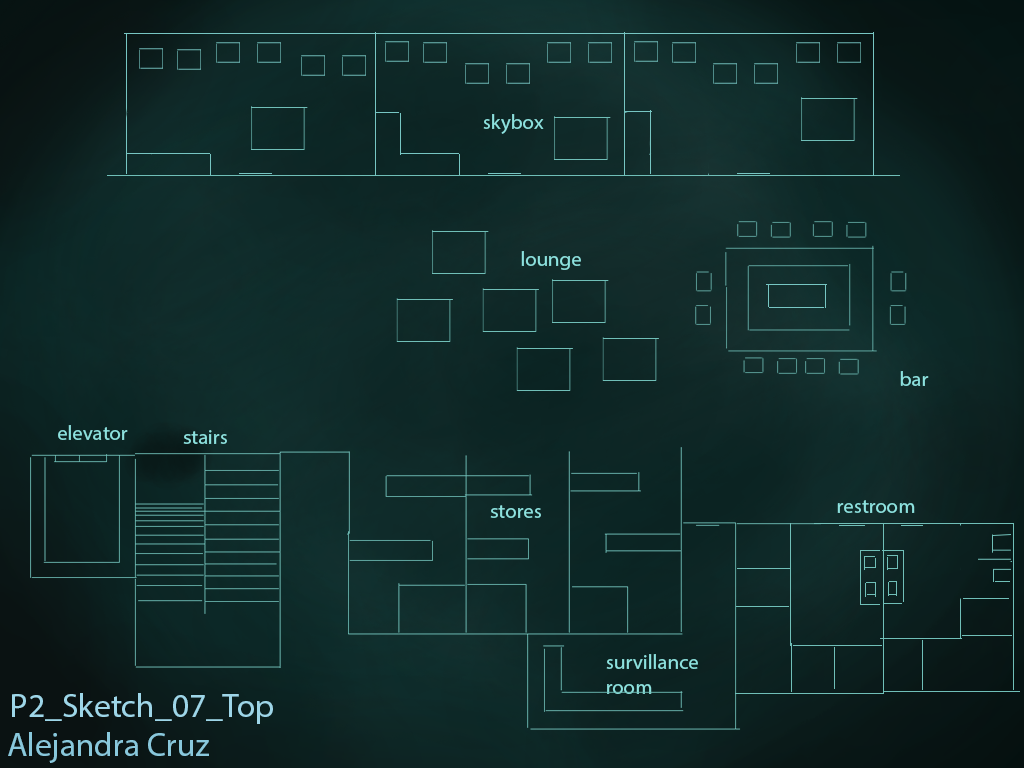
<style>
.page{position:relative;width:1024px;height:768px}
.page>*{position:absolute;margin:0}
.t1{font:20.8px "MyriadPro-Regular";color:#8de2df}
.t2{font:33.3px "MyriadPro-Regular";color:#9ed6e8}
.t3{font:33.3px "MyriadPro-Regular";color:#89c8dc}
</style>
<div class="page">
<p class="t1" style="left:483px;top:114px;width:61px;height:20px">skybox</p>
<p class="t1" style="left:521px;top:251px;width:60px;height:19px">lounge</p>
<p class="t1" style="left:900px;top:371px;width:29px;height:15px">bar</p>
<p class="t1" style="left:58px;top:425px;width:70px;height:15px">elevator</p>
<p class="t1" style="left:183px;top:430px;width:44px;height:14px">stairs</p>
<p class="t1" style="left:490px;top:505px;width:51px;height:13px">stores</p>
<p class="t1" style="left:837px;top:500px;width:78px;height:13px">restroom</p>
<p class="t1" style="left:606px;top:654px;width:92px;height:40px">survillance <br>room</p>
<p class="t2" style="left:12px;top:693px;width:261px;height:31px">P2_Sketch_07_Top</p>
<p class="t3" style="left:8px;top:732px;width:201px;height:31px">Alejandra Cruz</p>
</div>
